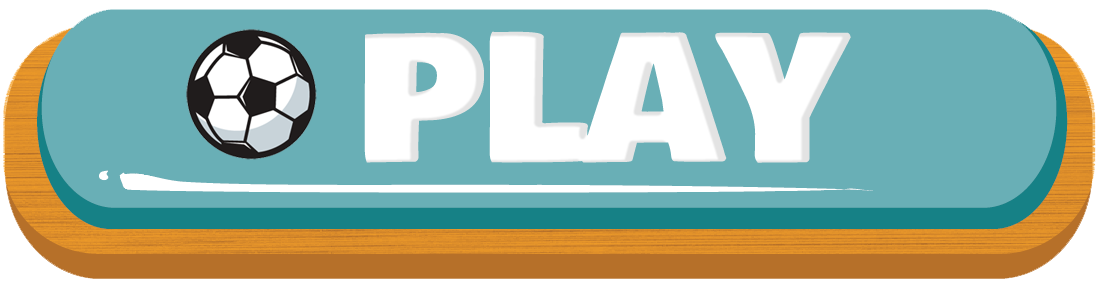
<style>
.page{position:relative;width:1098px;height:288px;background:#69afb6}
.page>*{position:absolute;margin:0}
.t1{font:166px "BowlbyOne";letter-spacing:-0.02em;color:#ffffff;font-weight:bold}
</style>
<div class="page">
<p class="t1" style="left:364px;top:31px;width:487px;height:132px">PLAY</p>
</div>
